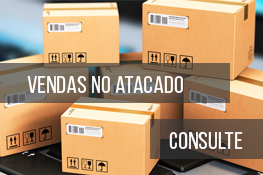
<style>
.page{position:relative;width:263px;height:175px}
.page>*{position:absolute;margin:0}
.t1{font:24px "BebasNeueRegular";letter-spacing:0.02em;color:#ffffff}
</style>
<div class="page">
<p class="t1" style="left:27px;top:75px;width:156px;height:18px">Vendas no atacado</p>
<p class="t1" style="left:169px;top:131px;width:74px;height:18px">Consulte</p>
</div>
